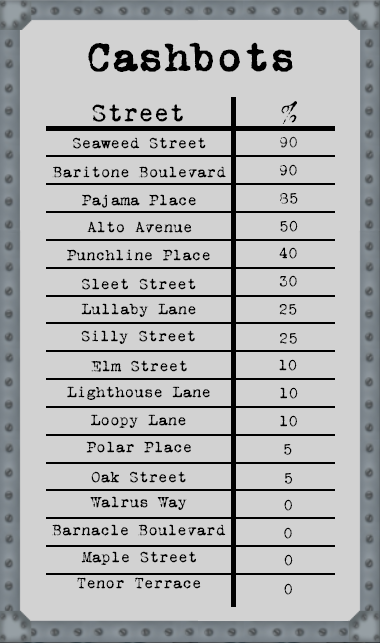
<style>
.page{position:relative;width:380px;height:643px;background:#d2d2d2}
.page>*{position:absolute;margin:0}
.t1{font:42px "VTPortableRemington";color:#000000;font-weight:bold}
.t2{font:26px "VTPortableRemington";color:#000000}
.t3{font:16px "VTPortableRemington";color:#000000}
.t4{font:16px "VTPortableRemington";color:#292929}
</style>
<div class="page">
<p class="t1" style="left:88px;top:42px;width:205px;height:30px">Cashbots</p>
<p class="t2" style="left:281px;top:101px;width:16px;height:23px">%</p>
<p class="t2" style="left:92px;top:104px;width:91px;height:18px">Street</p>
<p class="t3" style="left:73px;top:137px;width:133px;height:12px">Seaweed Street</p>
<p class="t4" style="left:280px;top:136px;width:17px;height:12px">90</p>
<p class="t3" style="left:52px;top:166px;width:174px;height:12px">Baritone Boulevard</p>
<p class="t3" style="left:279px;top:164px;width:18px;height:12px">90</p>
<p class="t3" style="left:82px;top:194px;width:114px;height:14px">Pajama Place</p>
<p class="t3" style="left:280px;top:193px;width:18px;height:11px">85</p>
<p class="t3" style="left:87px;top:221px;width:105px;height:12px">Alto Avenue</p>
<p class="t3" style="left:280px;top:220px;width:18px;height:12px">50</p>
<p class="t3" style="left:67px;top:249px;width:143px;height:12px">Punchline Place</p>
<p class="t3" style="left:279px;top:247px;width:18px;height:12px">40</p>
<p class="t3" style="left:82px;top:278px;width:114px;height:12px">Sleet Street</p>
<p class="t3" style="left:279px;top:275px;width:18px;height:12px">30</p>
<p class="t3" style="left:81px;top:303px;width:115px;height:14px">Lullaby Lane</p>
<p class="t3" style="left:279px;top:304px;width:18px;height:11px">25</p>
<p class="t3" style="left:81px;top:330px;width:114px;height:14px">Silly Street</p>
<p class="t3" style="left:280px;top:333px;width:17px;height:11px">25</p>
<p class="t3" style="left:91px;top:360px;width:96px;height:12px">Elm Street</p>
<p class="t3" style="left:279px;top:359px;width:18px;height:12px">10</p>
<p class="t3" style="left:67px;top:386px;width:143px;height:14px">Lighthouse Lane</p>
<p class="t3" style="left:280px;top:387px;width:18px;height:12px">10</p>
<p class="t3" style="left:91px;top:414px;width:95px;height:14px">Loopy Lane</p>
<p class="t3" style="left:280px;top:415px;width:17px;height:12px">10</p>
<p class="t3" style="left:86px;top:441px;width:105px;height:12px">Polar Place</p>
<p class="t3" style="left:284px;top:444px;width:8px;height:11px">5</p>
<p class="t3" style="left:91px;top:471px;width:95px;height:12px">Oak Street</p>
<p class="t3" style="left:285px;top:473px;width:8px;height:11px">5</p>
<p class="t3" style="left:90px;top:496px;width:97px;height:14px">Walrus Way</p>
<p class="t3" style="left:284px;top:499px;width:8px;height:12px">0</p>
<p class="t3" style="left:52px;top:524px;width:174px;height:12px">Barnacle Boulevard</p>
<p class="t3" style="left:284px;top:527px;width:8px;height:12px">0</p>
<p class="t3" style="left:81px;top:551px;width:115px;height:14px">Maple Street</p>
<p class="t3" style="left:284px;top:554px;width:9px;height:12px">0</p>
<p class="t3" style="left:77px;top:577px;width:124px;height:12px">Tenor Terrace</p>
<p class="t3" style="left:284px;top:583px;width:8px;height:12px">0</p>
</div>
